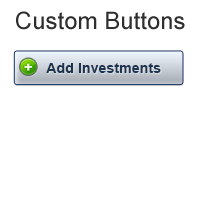
<style>
.page{position:relative;width:209px;height:208px;background:#ffffff}
.page>*{position:absolute;margin:0}
.t1{font:24px "ArialMT";color:#2e2e2e}
.t2{font:14px "Arial-BoldMT";letter-spacing:0.01em;color:#1e334e}
</style>
<div class="page">
<p class="t1" style="left:16px;top:11px;width:169px;height:19px">Custom Buttons</p>
<p class="t2" style="left:46px;top:63px;width:115px;height:10px">Add Investments</p>
</div>
